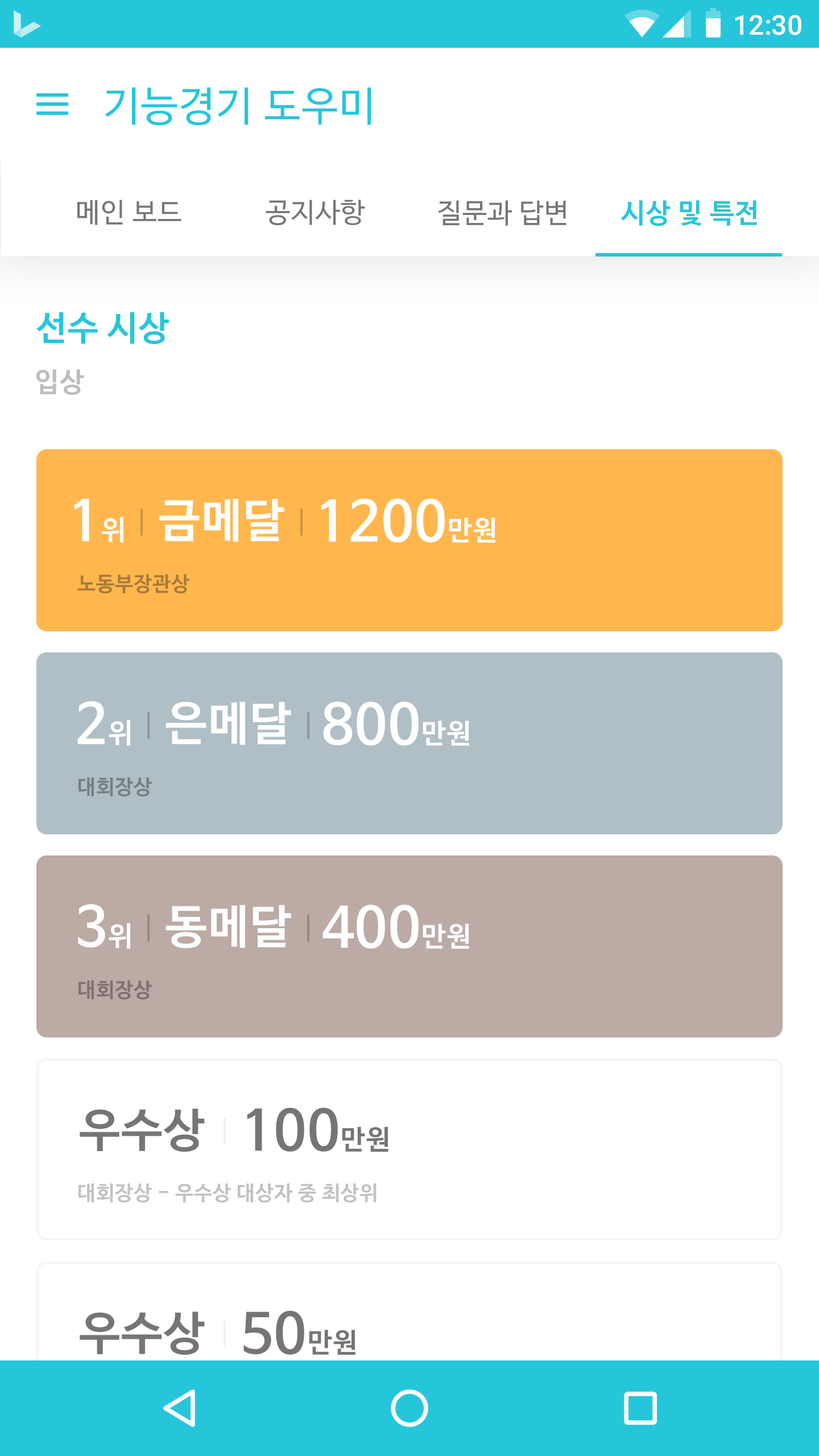
<style>
.page{position:relative;width:819px;height:1456px;background:#ffffff}
.page>*{position:absolute;margin:0}
.t1{font:27.3px "Roboto-Medium";color:#ffffff}
.t2{font:40.9px "NanumBarunGothic";letter-spacing:0.025em;color:#26c6da}
.t3{font:27.3px "NanumBarunGothic";letter-spacing:0.025em;color:#757575}
.t4{font:27.3px "NanumBarunGothicBold";letter-spacing:0.025em;color:#26c6da}
.t5{font:34.1px "NanumBarunGothicBold";letter-spacing:0.025em;color:#26c6da}
.t6{font:27.3px "NanumBarunGothicBold";letter-spacing:0.025em;color:#bdbdbd}
.t7{font:54.6px "NanumBarunGothicBold";letter-spacing:0.025em;color:#ffffff}
.t8{font:27.3px "NanumBarunGothicBold";letter-spacing:0.025em;color:#ffffff}
.t9{font:46.1px "NanumBarunGothicBold";letter-spacing:0.025em;color:#ffffff}
.t10{font:20.5px "NanumBarunGothicBold";letter-spacing:0.025em;color:#a87a39}
.t11{font:20.5px "NanumBarunGothicBold";letter-spacing:0.025em;color:#767f83}
.t12{font:20.5px "NanumBarunGothicBold";letter-spacing:0.025em;color:#7e726f}
.t13{font:46.1px "NanumBarunGothicBold";letter-spacing:0.025em;color:#757575}
.t14{font:54.6px "NanumBarunGothicBold";letter-spacing:0.025em;color:#757575}
.t15{font:27.3px "NanumBarunGothicBold";letter-spacing:0.025em;color:#757575}
.t16{font:20.5px "NanumBarunGothicBold";letter-spacing:0.025em;color:#c1c1c1}
</style>
<div class="page">
<p class="t1" style="left:735px;top:15px;width:66px;height:20px">12:30</p>
<p class="t2" style="left:105px;top:87px;width:266px;height:39px">기능경기 도우미</p>
<p class="t3" style="left:77px;top:200px;width:104px;height:25px">메인 보드</p>
<p class="t3" style="left:266px;top:200px;width:99px;height:25px">공지사항</p>
<p class="t3" style="left:437px;top:200px;width:129px;height:26px">질문과 답변</p>
<p class="t4" style="left:620px;top:200px;width:137px;height:26px">시상 및 특전</p>
<p class="t5" style="left:36px;top:312px;width:133px;height:32px">선수 시상</p>
<p class="t6" style="left:36px;top:369px;width:48px;height:26px">입상</p>
<p class="t7" style="left:74px;top:499px;width:49px;height:44px">1<span class="t8">위</span></p>
<p class="t9" style="left:159px;top:499px;width:125px;height:43px">금메달</p>
<p class="t7" style="left:321px;top:498px;width:174px;height:45px">1200<span class="t8">만원</span></p>
<p class="t10" style="left:77px;top:574px;width:112px;height:20px">노동부장관상</p>
<p class="t7" style="left:77px;top:701px;width:53px;height:45px">2<span class="t8">위</span></p>
<p class="t9" style="left:166px;top:702px;width:125px;height:43px">은메달</p>
<p class="t7" style="left:323px;top:701px;width:146px;height:45px">800<span class="t8">만원</span></p>
<p class="t11" style="left:78px;top:777px;width:74px;height:20px">대회장상</p>
<p class="t7" style="left:78px;top:904px;width:52px;height:45px">3<span class="t8">위</span></p>
<p class="t9" style="left:166px;top:905px;width:125px;height:43px">동메달</p>
<p class="t7" style="left:322px;top:904px;width:147px;height:45px">400<span class="t8">만원</span></p>
<p class="t12" style="left:78px;top:980px;width:74px;height:20px">대회장상</p>
<p class="t13" style="left:80px;top:1108px;width:125px;height:44px">우수상</p>
<p class="t14" style="left:247px;top:1107px;width:141px;height:45px">100<span class="t15">만원</span></p>
<p class="t16" style="left:78px;top:1183px;width:299px;height:20px">대회장상 - 우수상 대상자 중 최상위</p>
<p class="t13" style="left:80px;top:1312px;width:125px;height:43px">우수상</p>
<p class="t14" style="left:243px;top:1310px;width:112px;height:45px">50<span class="t15">만원</span></p>
</div>
